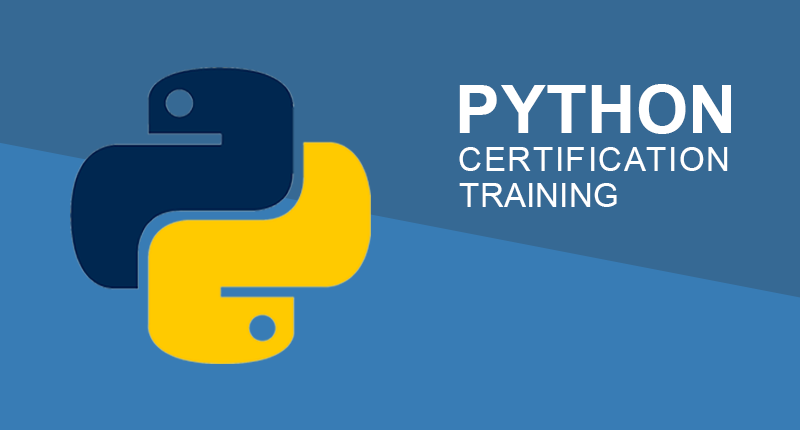
<style>
.page{position:relative;width:800px;height:430px;background:#366994}
.page>*{position:absolute;margin:0}
.t1{font:66.7px "Arial-BoldMT";letter-spacing:0.01em;color:#ffffff}
.t2{font:33.3px "ArialMT";letter-spacing:0.05em;color:#ffffff}
.t3{font:33.3px "ArialMT";color:#ffffff}
</style>
<div class="page">
<p class="t1" style="left:459px;top:84px;width:272px;height:50px">PYTHON</p>
<p class="t2" style="left:459px;top:147px;width:269px;height:24px">CERTIFICATION</p>
<p class="t3" style="left:459px;top:183px;width:158px;height:24px">TRAINING</p>
</div>
